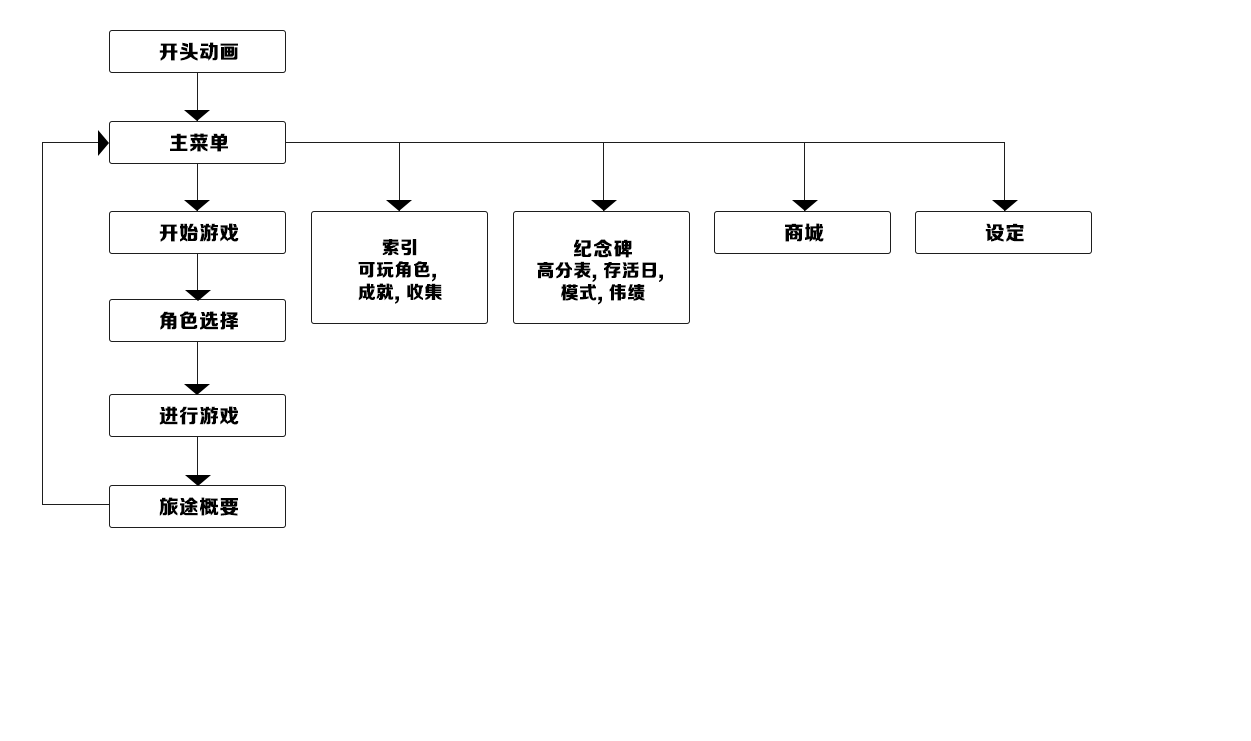
<style>
.page{position:relative;width:1251px;height:741px;background:#ffffff}
.page>*{position:absolute;margin:0}
.t1{font:19.7px "FZZDHJW--GB1-0";letter-spacing:0.04em;color:#000000}
.t2{font:18px/22.3px "FZZDHJW--GB1-0";letter-spacing:0.04em;color:#000000}
.t3{font:19.7px/22.3px "FZZDHJW--GB1-0";letter-spacing:0.04em;color:#000000}
</style>
<div class="page">
<p class="t1" style="left:159px;top:42px;width:79px;height:19px">开头动画</p>
<p class="t1" style="left:170px;top:133px;width:58px;height:19px">主菜单</p>
<p class="t1" style="left:159px;top:223px;width:80px;height:19px">开始游戏</p>
<p class="t1" style="left:785px;top:223px;width:39px;height:19px">商城</p>
<p class="t1" style="left:985px;top:223px;width:39px;height:19px">设定</p>
<p class="t2" style="left:358px;top:239px;width:84px;height:65px;text-align:center">索引<br>可玩角色, <br>成就, 收集</p>
<p class="t2" style="left:537px;top:239px;width:126px;height:66px;text-align:center"><span class="t3">纪念碑<br></span>高分表, 存活日, <br>模式, 伟绩</p>
<p class="t1" style="left:160px;top:311px;width:78px;height:19px">角色选择</p>
<p class="t1" style="left:159px;top:406px;width:80px;height:19px">进行游戏</p>
<p class="t1" style="left:159px;top:497px;width:79px;height:19px">旅途概要</p>
</div>
